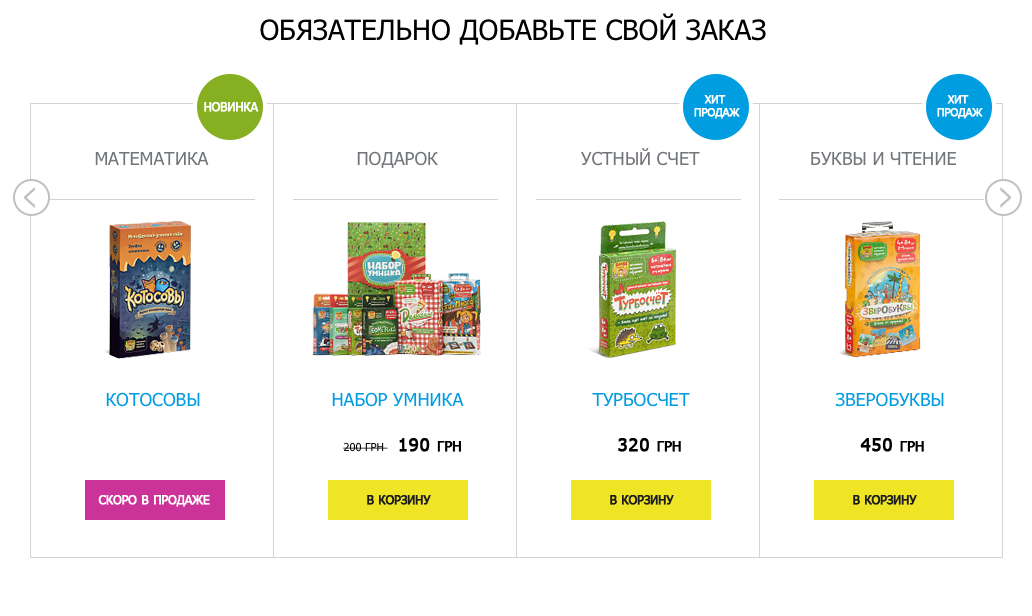
<style>
.page{position:relative;width:1032px;height:616px;background:#ffffff}
.page>*{position:absolute;margin:0}
.t1{font:28px "Tahoma";color:#000000;text-transform:uppercase}
.t2{font:12px "Tahoma";color:#ffffff;text-transform:uppercase;font-weight:bold}
.t3{font:11px/8px "Tahoma";color:#ffffff;text-transform:uppercase;font-weight:bold}
.t4{font:18px "Tahoma";color:#72767a;text-transform:uppercase}
.t5{font:37.4px "Tahoma";color:#c0c0c0;scale:0.53 1}
.t6{font:18px "Tahoma";color:#009be1;text-transform:uppercase}
.t7{font:11px "Tahoma";color:#000000;text-transform:uppercase}
.t8{font:18px "Tahoma";color:#000000;text-transform:uppercase;font-weight:bold}
.t9{font:14px "Tahoma";color:#000000;text-transform:uppercase;font-weight:bold}
.t10{font:12px "Tahoma";color:#1d1d1d;text-transform:uppercase;font-weight:bold}
</style>
<div class="page">
<p class="t1" style="left:260px;top:13px;width:506px;height:32px">Обязательно добавьте свой заказ</p>
<p class="t2" style="left:204px;top:102px;width:55px;height:10px">новинка</p>
<p class="t3" style="left:694px;top:95px;width:46px;height:24px;text-align:center">хит <br>продаж</p>
<p class="t3" style="left:937px;top:95px;width:46px;height:24px;text-align:center">хит <br>продаж</p>
<p class="t4" style="left:581px;top:148px;width:119px;height:18px">устный счет</p>
<p class="t4" style="left:95px;top:152px;width:114px;height:13px">МАтематика</p>
<p class="t4" style="left:357px;top:151px;width:81px;height:17px">Подарок</p>
<p class="t4" style="left:811px;top:152px;width:145px;height:13px">буквы и чтение</p>
<p class="t5" style="left:24px;top:187px;width:11px;height:21px">&lt;</p>
<p class="t5" style="left:1000px;top:187px;width:11px;height:21px;rotate:180deg">&lt;</p>
<p class="t6" style="left:106px;top:392px;width:94px;height:15px">Котосовы</p>
<p class="t6" style="left:332px;top:392px;width:132px;height:15px">набор умника</p>
<p class="t6" style="left:592px;top:392px;width:98px;height:15px">турбосчет</p>
<p class="t6" style="left:835px;top:392px;width:109px;height:15px">зверобуквы</p>
<p class="t7" style="left:343px;top:438px;width:118px;height:14px">200 грн    <span class="t8">190 </span><span class="t9">грн</span></p>
<p class="t8" style="left:618px;top:438px;width:63px;height:14px">320 <span class="t9">грн</span></p>
<p class="t8" style="left:860px;top:438px;width:64px;height:14px">450 <span class="t9">грн</span></p>
<p class="t2" style="left:98px;top:495px;width:112px;height:12px">скоро в продаже</p>
<p class="t10" style="left:367px;top:495px;width:64px;height:10px">в корзину</p>
<p class="t10" style="left:610px;top:495px;width:64px;height:10px">в корзину</p>
<p class="t10" style="left:853px;top:495px;width:64px;height:10px">в корзину</p>
</div>
